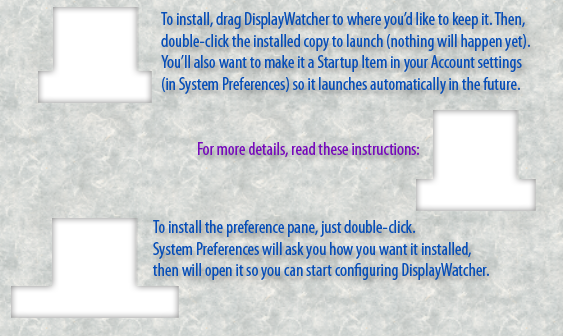
<style>
.page{position:relative;width:563px;height:336px}
.page>*{position:absolute;margin:0}
.t1{font:18px "MyriadPro-Cond";color:#074eb8}
.t2{font:18px "MyriadPro-Cond";color:#760abb}
</style>
<div class="page">
<p class="t1" style="left:161px;top:11px;width:369px;height:83px">To install, drag DisplayWatcher to where you’d like to keep it. Then,<br>double-click the installed copy to launch (nothing will happen yet).<br>You’ll also want to make it a Startup Item in your Account settings<br>(in System Preferences) so it launches automatically in the future.</p>
<p class="t2" style="left:198px;top:142px;width:221px;height:16px">For more details, read these instructions:</p>
<p class="t1" style="left:153px;top:220px;width:336px;height:60px">To install the preference pane, just double-click.<br>System Preferences will ask you how you want it installed,<br>then will open it so you can start configuring DisplayWatcher.</p>
</div>
